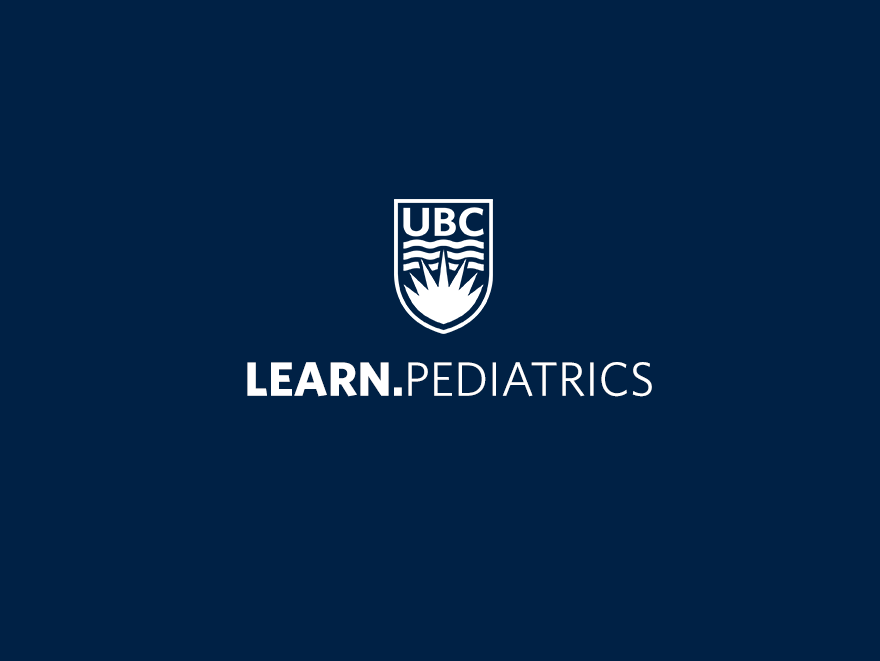
<style>
.page{position:relative;width:880px;height:661px;background:#002145}
.page>*{position:absolute;margin:0}
.t1{font:48.2px "Whitney-Book";color:#ffffff}
.t2{font:48.2px "Whitney-Bold";color:#ffffff}
</style>
<div class="page">
<p class="t1" style="left:247px;top:362px;width:405px;height:35px"><span class="t2">LEARN.</span>PEDIATRICS</p>
</div>
